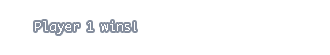
<style>
.page{position:relative;width:330px;height:55px;background:#ffffff}
.page>*{position:absolute;margin:0}
.t1{font:12.5px "Ayuthaya";color:#ffffff}
</style>
<div class="page">
<p class="t1" style="left:35px;top:21px;width:101px;height:13px">Player 1 wins!</p>
</div>
